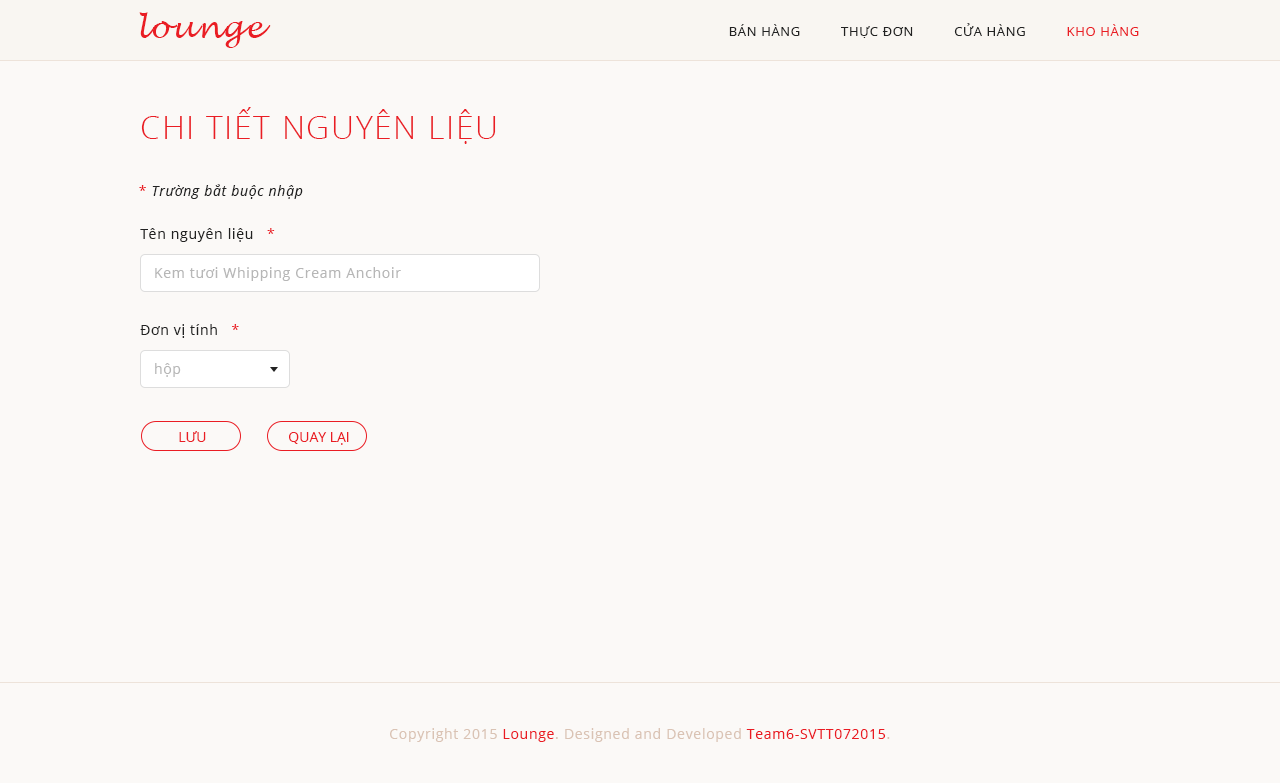
<style>
.page{position:relative;width:1280px;height:783px;background:#fbf9f7}
.page>*{position:absolute;margin:0}
.t1{font:30px "LucidaHandwriting-Italic";letter-spacing:0.05em;color:#ea1d24}
.t2{font:13px "OpenSans";letter-spacing:0.05em;color:#222222}
.t3{font:13px "OpenSans";letter-spacing:0.05em;color:#ea1d24}
.t4{font:32px "OpenSans-Light";letter-spacing:0.05em;color:#ea1d24}
.t5{font:14px "OpenSans-Italic";letter-spacing:0.05em;color:#222222}
.t6{font:14px "OpenSans";letter-spacing:0.05em;color:#ea1d24}
.t7{font:14px "OpenSans";letter-spacing:0.05em;color:#222222}
.t8{font:14px "OpenSans";letter-spacing:0.05em;color:#b7b7b7}
.t9{font:14px "OpenSans";color:#ea1d24}
.t10{font:14px "OpenSans";letter-spacing:0.05em;color:#dac3b4}
.t11{font:14px "OpenSans";letter-spacing:0.05em;color:#ea1b23}
</style>
<div class="page">
<p class="t1" style="left:139px;top:12px;width:132px;height:36px">lounge</p>
<p class="t2" style="left:729px;top:23px;width:410px;height:15px">BÁN HÀNG          THỰC ĐƠN          CỬA HÀNG          <span class="t3">KHO HÀNG</span></p>
<p class="t4" style="left:141px;top:107px;width:355px;height:37px">CHI TIẾT NGUYÊN LIỆU</p>
<p class="t5" style="left:139px;top:184px;width:164px;height:15px"><span class="t6">* </span>Trường bắt buộc nhập</p>
<p class="t7" style="left:140px;top:228px;width:135px;height:14px">Tên nguyên liệu   <span class="t6">*</span></p>
<p class="t8" style="left:155px;top:267px;width:246px;height:14px">Kem tươi Whipping Cream Anchoir</p>
<p class="t7" style="left:140px;top:324px;width:99px;height:14px">Đơn vị tính   <span class="t6">*</span></p>
<p class="t8" style="left:155px;top:363px;width:26px;height:14px">hộp</p>
<p class="t9" style="left:179px;top:431px;width:27px;height:11px">LƯU</p>
<p class="t9" style="left:289px;top:432px;width:60px;height:13px">QUAY LẠI</p>
<p class="t10" style="left:390px;top:728px;width:500px;height:14px">Copyright 2015 <span class="t11">Lounge</span>. Designed and Developed <span class="t11">Team6-SVTT072015</span>.</p>
</div>
